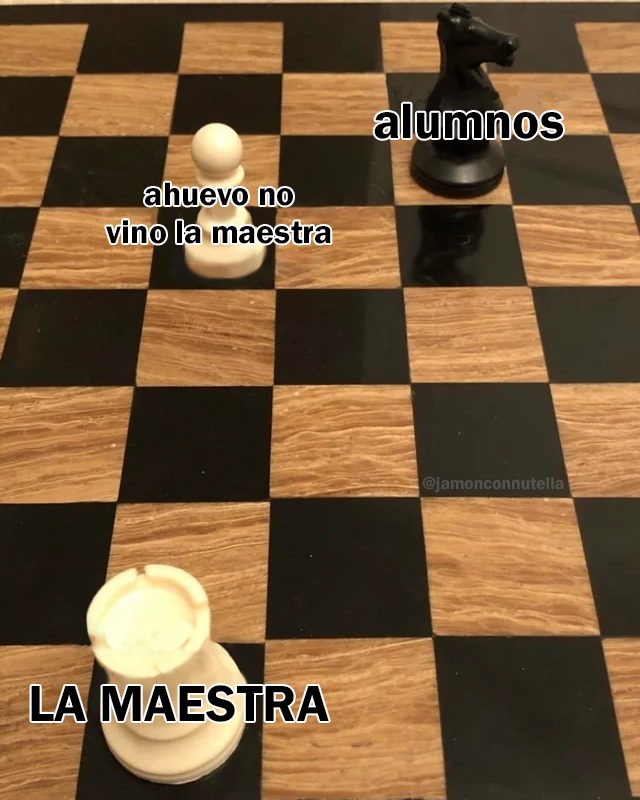
<style>
.page{position:relative;width:640px;height:800px}
.page>*{position:absolute;margin:0}
.t1{font:51.3px "FranklinGothic-Demi";color:#000000}
.t2{font:33.6px "FranklinGothic-Demi";color:#000000}
.t3{font:17.5px "FranklinGothic-Demi";color:#55514a}
.t4{font:52.4px "FranklinGothic-Demi";color:#000000}
</style>
<div class="page">
<p class="t1" style="left:374px;top:103px;width:189px;height:36px">alumnos</p>
<p class="t2" style="left:106px;top:182px;width:225px;height:62px;text-align:center">ahuevo no<br>vino la maestra</p>
<p class="t3" style="left:422px;top:476px;width:142px;height:17px">@jamonconnutella</p>
<p class="t4" style="left:31px;top:685px;width:298px;height:37px">LA MAESTRA</p>
</div>
